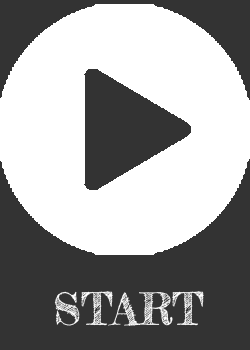
<style>
.page{position:relative;width:250px;height:350px;background:#ffffff}
.page>*{position:absolute;margin:0}
.t1{font:44px "FrederickatheGreat-Regular";color:#ffffff}
</style>
<div class="page">
<p class="t1" style="left:54px;top:291px;width:150px;height:35px">START</p>
</div>
